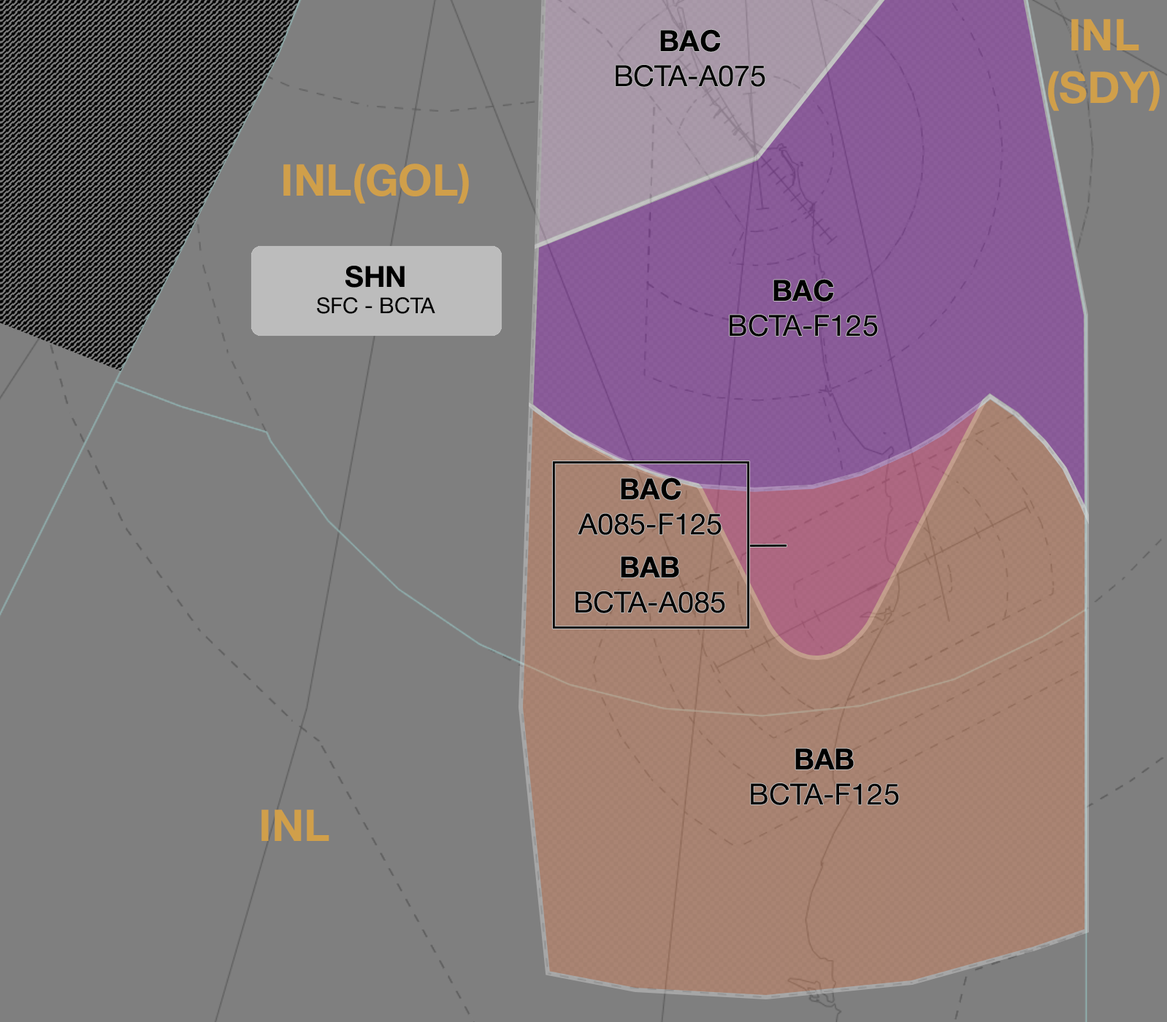
<style>
.page{position:relative;width:1167px;height:1022px;background:#7f7f7f}
.page>*{position:absolute;margin:0}
.t1{font:29.2px "HelveticaNeue-Roman";color:#000000}
.t2{font:29.2px "HelveticaNeue-Bold";color:#000000}
.t3{font:43.8px "HelveticaNeue-Bold";color:#d09f4a}
.t4{font:21.9px "HelveticaNeue-Roman";color:#000000}
</style>
<div class="page">
<p class="t1" style="left:615px;top:29px;width:150px;height:58px;text-align:center"><span class="t2">BAC<br></span>BCTA-A075</p>
<p class="t3" style="left:1048px;top:19px;width:111px;height:92px;text-align:center">INL<br>(SDY)</p>
<p class="t3" style="left:283px;top:164px;width:186px;height:40px">INL(GOL)</p>
<p class="t4" style="left:317px;top:266px;width:118px;height:48px;text-align:center"><span class="t2">SHN<br></span>SFC - BCTA</p>
<p class="t1" style="left:729px;top:279px;width:149px;height:58px;text-align:center"><span class="t2">BAC<br></span>BCTA-F125</p>
<p class="t1" style="left:577px;top:477px;width:144px;height:58px;text-align:center"><span class="t2">BAC<br></span>A085-F125</p>
<p class="t1" style="left:575px;top:556px;width:150px;height:57px;text-align:center"><span class="t2">BAB<br></span>BCTA-A085</p>
<p class="t1" style="left:751px;top:748px;width:148px;height:57px;text-align:center"><span class="t2">BAB<br></span>BCTA-F125</p>
<p class="t3" style="left:261px;top:810px;width:68px;height:31px">INL</p>
</div>
